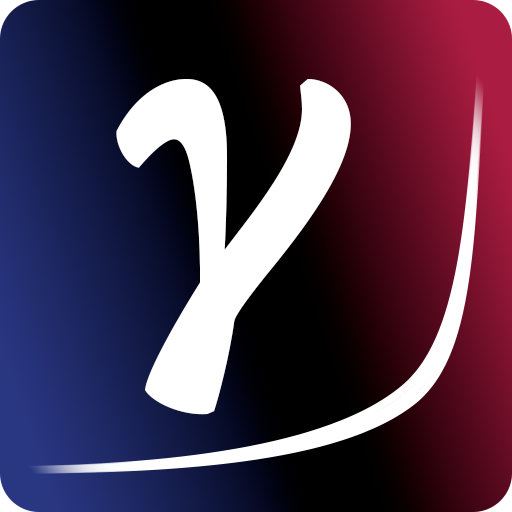
<style>
.page{position:relative;width:512px;height:512px}
.page>*{position:absolute;margin:0}
.t1{font:482px "Minion3Caption-BoldItalic";color:#ffffff}
</style>
<div class="page">
<p class="t1" style="left:116px;top:79px;width:235px;height:336px">γ</p>
</div>
